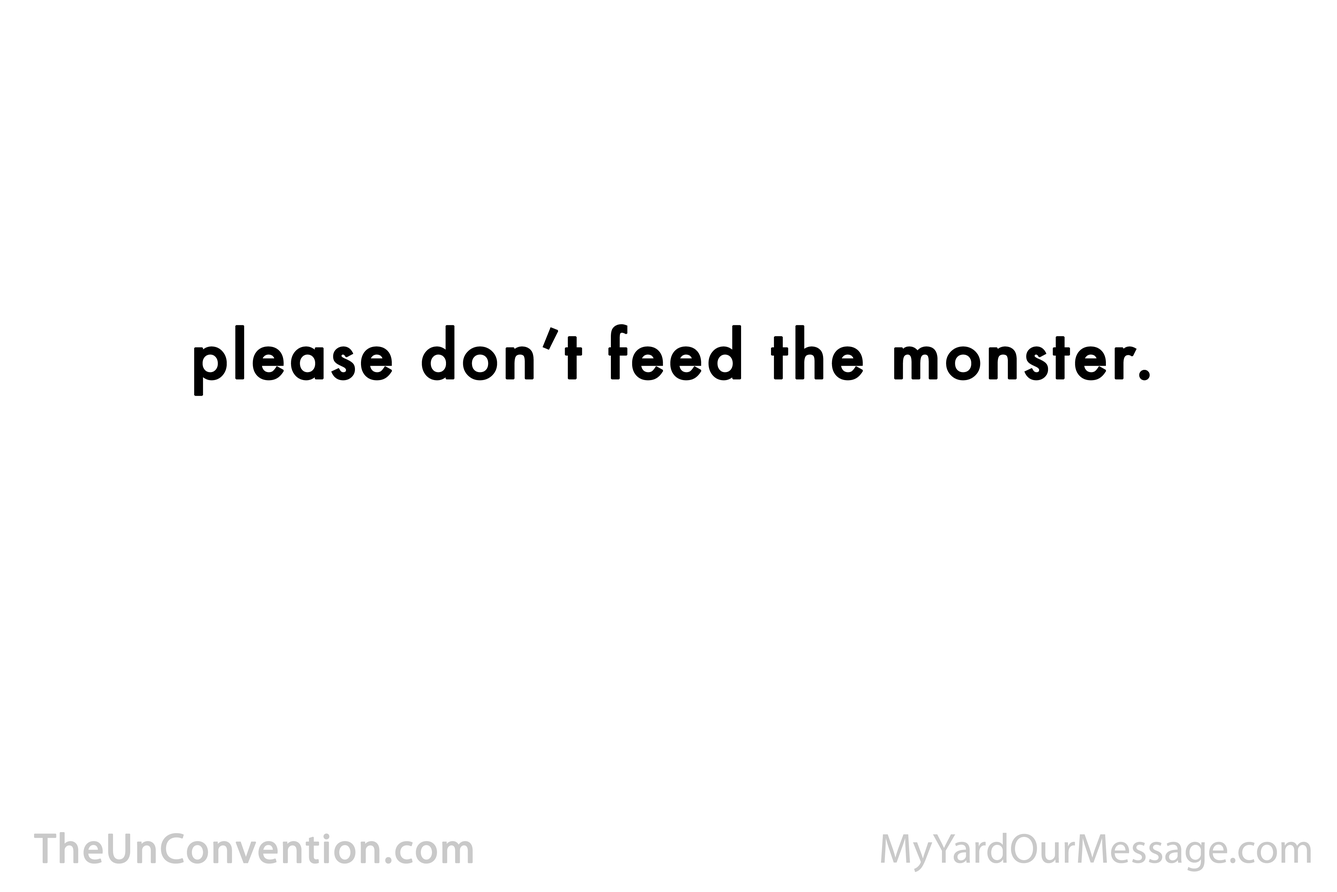
<style>
.page{position:relative;width:1337px;height:892px;background:#ffffff}
.page>*{position:absolute;margin:0}
.t1{font:63.7px "Futura-Medium";letter-spacing:0.02em;color:#000000;font-weight:bold}
.t2{font:42px "MyriadPro-Regular";letter-spacing:0.02em;color:#c9c9c9;font-weight:bold}
.t3{font:42px "MyriadPro-Regular";color:#c9c9c9}
</style>
<div class="page">
<p class="t1" style="left:194px;top:324px;width:956px;height:72px">please don’t feed the monster.</p>
<p class="t2" style="left:34px;top:832px;width:439px;height:31px">TheUnConvention.com</p>
<p class="t3" style="left:881px;top:832px;width:430px;height:40px">MyYardOurMessage.com</p>
</div>
